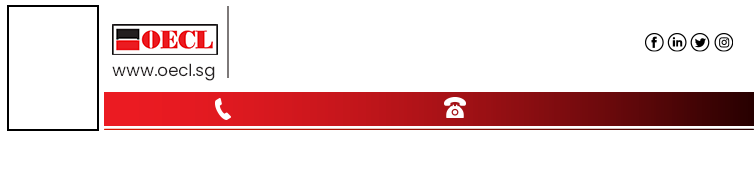
<style>
.page{position:relative;width:754px;height:188px;background:#ffffff}
.page>*{position:absolute;margin:0}
.t1{font:16.7px "Poppins-Regular";color:#231f20}
</style>
<div class="page">
<p class="t1" style="left:112px;top:63px;width:103px;height:18px">www.oecl.sg</p>
</div>
